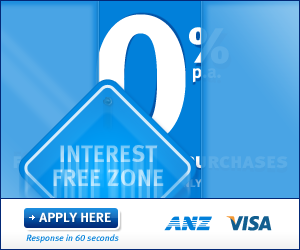
<style>
.page{position:relative;width:300px;height:250px}
.page>*{position:absolute;margin:0}
.t1{font:188.6px "MetaBoldLF-Roman";color:#ffffff}
.t2{font:50.6px "MetaBlackLF-Roman"}
.t3{font:19.2px "MetaBoldLF-Roman";letter-spacing:-0.02em}
.t4{font:23.7px/23.7px "MetaBoldLF-Caps"}
.t5{font:14px "MetaBoldLF-Roman";color:#ffffff}
.t6{font:9px "MetaMediumLF-Italic";color:#0180da}
</style>
<div class="page">
<p class="t1" style="left:95px;top:14px;width:91px;height:131px">0</p>
<p class="t1" style="left:95px;top:14px;width:91px;height:131px">0</p>
<p class="t2" style="left:189px;top:27px;width:40px;height:37px">%</p>
<p class="t2" style="left:189px;top:27px;width:40px;height:37px">%</p>
<p class="t3" style="left:192px;top:68px;width:29px;height:15px">p.a.</p>
<p class="t3" style="left:192px;top:68px;width:29px;height:15px">p.a.</p>
<p class="t4" style="left:53px;top:145px;width:111px;height:41px;text-align:center">INTEREST<br>FREE ZONE</p>
<p class="t5" style="left:39px;top:212px;width:72px;height:10px">APPLY HERE</p>
<p class="t6" style="left:26px;top:234px;width:93px;height:9px">Response in 60 seconds</p>
</div>
